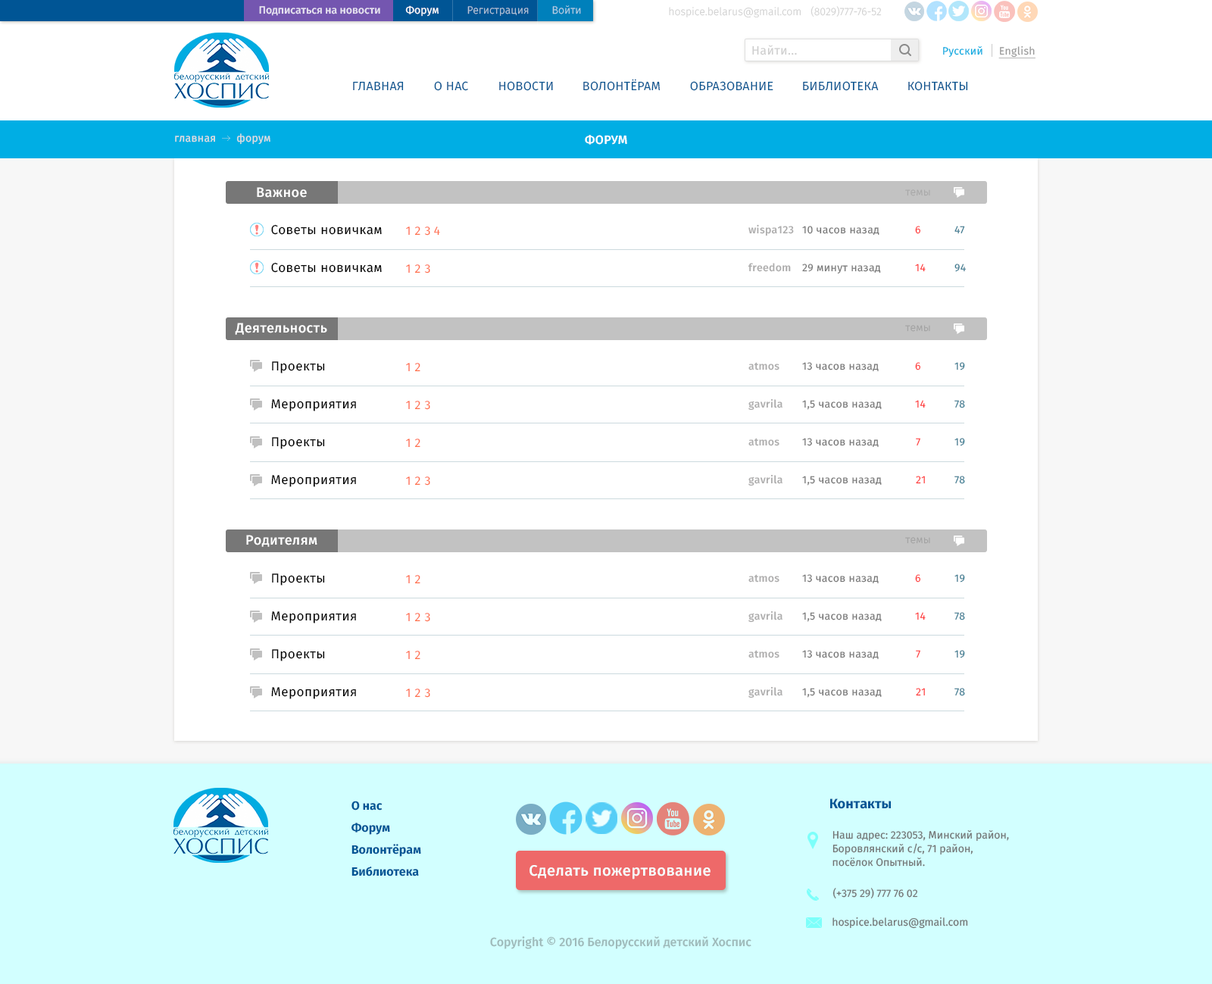
<style>
.page{position:relative;width:1212px;height:984px;background:#ffffff}
.page>*{position:absolute;margin:0}
.t1{font:10.6px "FiraSans-Regular";color:#ffffff}
.t2{font:10.6px "FiraSans-Light";color:#b8d2e5}
.t3{font:10.6px "FiraSans-Medium";color:#e8e4f1}
.t4{font:10.6px "FiraSans-Light";color:#b8c6d9}
.t5{font:10.6px "FiraSans-Light";color:#d1d1d1}
.t6{font:10.6px "FiraSans-Light"}
.t7{font:12.1px "FiraSans-Regular";letter-spacing:0.025em;color:#cdcdcd}
.t8{font:10.6px "FiraSans-Regular";letter-spacing:0.025em;color:#00ace1}
.t9{font:10.6px "FiraSans-Regular";letter-spacing:0.025em;color:#999999;text-decoration:underline}
.t10{font:12.1px "FiraSans-Regular";letter-spacing:0.025em;color:#095691;text-transform:uppercase}
.t11{font:10.6px "FiraSans-Regular";letter-spacing:0.025em;color:#e0dfdf}
.t12{font:12.1px "FiraSans-Medium";letter-spacing:0.025em;color:#ffffff;text-transform:uppercase}
.t13{font:13.6px "FiraSans-Medium";letter-spacing:0.025em;color:#ffffff}
.t14{font:10.6px "FiraSans-Light";letter-spacing:0.025em;color:#a7a7a7}
.t15{font:12.9px "FiraSans-Regular";letter-spacing:0.025em;color:#000000}
.t16{font:12.1px "FiraSans-Regular";letter-spacing:0.025em;color:#ff724c}
.t17{font:10.6px "FiraSans-Medium";letter-spacing:0.025em;color:#999898}
.t18{font:10.6px "FiraSans-Regular";letter-spacing:0.025em;color:#767676}
.t19{font:10.6px "FiraSans-Regular";letter-spacing:0.025em;color:#ff3333}
.t20{font:10.6px "FiraSans-Regular";letter-spacing:0.025em;color:#337c92}
.t21{font:10.6px "FiraSans-Light";letter-spacing:0.025em;color:#a0a0a0}
.t22{font:12.1px "FiraSans-Bold";color:#005595}
.t23{font:13.6px "FiraSans-Bold";color:#005595}
.t24{font:10.6px/13.6px "FiraSans-Regular";color:#727272}
.t25{font:15.1px "FiraSans-Medium";letter-spacing:0.025em;color:#ffffff}
.t26{font:10.6px "FiraSans-Regular";color:#727272}
.t27{font:12.1px "FiraSans-Medium";color:#9fbaba}
</style>
<div class="page">
<p class="t1" style="left:405px;top:5px;width:34px;height:12px">Форум</p>
<p class="t2" style="left:552px;top:5px;width:29px;height:9px">Войти</p>
<p class="t3" style="left:259px;top:6px;width:121px;height:10px">Подписаться на новости</p>
<p class="t4" style="left:467px;top:6px;width:62px;height:10px">Регистрация</p>
<p class="t5" style="left:669px;top:7px;width:132px;height:10px">hospice.belarus@gmail.com</p>
<p class="t6" style="left:810px;top:6px;width:72px;height:11px">(8029)777-76-52</p>
<p class="t7" style="left:752px;top:45px;width:45px;height:10px">Найти...</p>
<p class="t8" style="left:943px;top:46px;width:39px;height:12px">Русский</p>
<p class="t9" style="left:998px;top:45px;width:37px;height:14px">English</p>
<p class="t10" style="left:353px;top:81px;width:51px;height:10px">Главная</p>
<p class="t10" style="left:434px;top:81px;width:34px;height:10px">о нас</p>
<p class="t10" style="left:499px;top:81px;width:54px;height:10px">новости</p>
<p class="t10" style="left:583px;top:79px;width:77px;height:12px">Волонтёрам</p>
<p class="t10" style="left:690px;top:81px;width:83px;height:10px">образование</p>
<p class="t10" style="left:803px;top:81px;width:76px;height:10px">Библиотека</p>
<p class="t10" style="left:908px;top:81px;width:60px;height:10px">КОнтакты</p>
<p class="t11" style="left:175px;top:136px;width:40px;height:6px">главная</p>
<p class="t11" style="left:236px;top:133px;width:34px;height:12px">форум</p>
<p class="t12" style="left:585px;top:135px;width:42px;height:10px">форум</p>
<p class="t13" style="left:257px;top:187px;width:50px;height:11px">Важное</p>
<p class="t14" style="left:905px;top:189px;width:25px;height:7px">темы</p>
<p class="t15" style="left:271px;top:224px;width:111px;height:11px">Советы новичкам</p>
<p class="t16" style="left:406px;top:226px;width:4px;height:9px">1</p>
<p class="t16" style="left:414px;top:226px;width:6px;height:10px">2</p>
<p class="t16" style="left:424px;top:226px;width:6px;height:10px">3</p>
<p class="t16" style="left:434px;top:226px;width:6px;height:10px">4</p>
<p class="t17" style="left:748px;top:224px;width:46px;height:12px">wispa123</p>
<p class="t18" style="left:802px;top:226px;width:77px;height:10px">10 часов назад</p>
<p class="t19" style="left:915px;top:226px;width:6px;height:8px">6</p>
<p class="t20" style="left:954px;top:226px;width:11px;height:8px">47</p>
<p class="t15" style="left:271px;top:262px;width:111px;height:11px">Советы новичкам</p>
<p class="t16" style="left:406px;top:264px;width:4px;height:9px">1</p>
<p class="t16" style="left:414px;top:264px;width:6px;height:9px">2</p>
<p class="t16" style="left:424px;top:264px;width:6px;height:9px">3</p>
<p class="t17" style="left:748px;top:263px;width:43px;height:9px">freedom</p>
<p class="t18" style="left:802px;top:264px;width:79px;height:10px">29 минут назад</p>
<p class="t19" style="left:915px;top:264px;width:11px;height:8px">14</p>
<p class="t20" style="left:954px;top:264px;width:12px;height:8px">94</p>
<p class="t13" style="left:235px;top:323px;width:92px;height:12px">Деятельность</p>
<p class="t21" style="left:905px;top:325px;width:25px;height:7px">темы</p>
<p class="t15" style="left:272px;top:361px;width:53px;height:12px">Проекты</p>
<p class="t16" style="left:406px;top:363px;width:4px;height:8px">1</p>
<p class="t16" style="left:414px;top:363px;width:6px;height:9px">2</p>
<p class="t17" style="left:748px;top:362px;width:31px;height:8px">atmos</p>
<p class="t18" style="left:802px;top:362px;width:77px;height:10px">13 часов назад</p>
<p class="t19" style="left:915px;top:362px;width:6px;height:8px">6</p>
<p class="t20" style="left:954px;top:362px;width:11px;height:8px">19</p>
<p class="t15" style="left:271px;top:399px;width:85px;height:12px">Мероприятия</p>
<p class="t16" style="left:406px;top:401px;width:4px;height:8px">1</p>
<p class="t16" style="left:414px;top:401px;width:6px;height:9px">2</p>
<p class="t16" style="left:424px;top:401px;width:6px;height:9px">3</p>
<p class="t17" style="left:748px;top:398px;width:34px;height:13px">gavrila</p>
<p class="t18" style="left:802px;top:400px;width:80px;height:10px">1,5 часов назад</p>
<p class="t19" style="left:915px;top:400px;width:11px;height:8px">14</p>
<p class="t20" style="left:954px;top:400px;width:11px;height:8px">78</p>
<p class="t15" style="left:272px;top:437px;width:53px;height:12px">Проекты</p>
<p class="t17" style="left:748px;top:438px;width:31px;height:8px">atmos</p>
<p class="t18" style="left:802px;top:438px;width:77px;height:10px">13 часов назад</p>
<p class="t19" style="left:916px;top:438px;width:4px;height:8px">7</p>
<p class="t20" style="left:954px;top:438px;width:11px;height:8px">19</p>
<p class="t16" style="left:406px;top:439px;width:4px;height:8px">1</p>
<p class="t16" style="left:414px;top:439px;width:6px;height:9px">2</p>
<p class="t15" style="left:271px;top:475px;width:85px;height:12px">Мероприятия</p>
<p class="t16" style="left:406px;top:476px;width:4px;height:9px">1</p>
<p class="t16" style="left:414px;top:476px;width:6px;height:10px">2</p>
<p class="t16" style="left:424px;top:476px;width:6px;height:10px">3</p>
<p class="t17" style="left:748px;top:474px;width:34px;height:12px">gavrila</p>
<p class="t18" style="left:802px;top:476px;width:80px;height:10px">1,5 часов назад</p>
<p class="t19" style="left:916px;top:476px;width:9px;height:8px">21</p>
<p class="t20" style="left:954px;top:476px;width:11px;height:8px">78</p>
<p class="t13" style="left:246px;top:535px;width:71px;height:12px">Родителям</p>
<p class="t21" style="left:905px;top:537px;width:25px;height:7px">темы</p>
<p class="t15" style="left:272px;top:573px;width:53px;height:13px">Проекты</p>
<p class="t16" style="left:406px;top:575px;width:4px;height:8px">1</p>
<p class="t16" style="left:414px;top:575px;width:6px;height:9px">2</p>
<p class="t17" style="left:748px;top:574px;width:31px;height:8px">atmos</p>
<p class="t18" style="left:802px;top:574px;width:77px;height:10px">13 часов назад</p>
<p class="t19" style="left:915px;top:574px;width:6px;height:8px">6</p>
<p class="t20" style="left:954px;top:574px;width:11px;height:8px">19</p>
<p class="t15" style="left:271px;top:611px;width:85px;height:12px">Мероприятия</p>
<p class="t16" style="left:406px;top:613px;width:4px;height:8px">1</p>
<p class="t16" style="left:414px;top:613px;width:6px;height:9px">2</p>
<p class="t16" style="left:424px;top:613px;width:6px;height:9px">3</p>
<p class="t17" style="left:748px;top:611px;width:34px;height:12px">gavrila</p>
<p class="t18" style="left:802px;top:612px;width:80px;height:10px">1,5 часов назад</p>
<p class="t19" style="left:915px;top:612px;width:11px;height:8px">14</p>
<p class="t20" style="left:954px;top:612px;width:11px;height:8px">78</p>
<p class="t15" style="left:272px;top:649px;width:53px;height:12px">Проекты</p>
<p class="t16" style="left:406px;top:651px;width:4px;height:8px">1</p>
<p class="t16" style="left:414px;top:651px;width:6px;height:9px">2</p>
<p class="t17" style="left:748px;top:650px;width:31px;height:8px">atmos</p>
<p class="t18" style="left:802px;top:650px;width:77px;height:10px">13 часов назад</p>
<p class="t19" style="left:916px;top:650px;width:4px;height:8px">7</p>
<p class="t20" style="left:954px;top:650px;width:11px;height:8px">19</p>
<p class="t15" style="left:271px;top:687px;width:85px;height:12px">Мероприятия</p>
<p class="t16" style="left:406px;top:689px;width:4px;height:8px">1</p>
<p class="t16" style="left:414px;top:689px;width:6px;height:9px">2</p>
<p class="t16" style="left:424px;top:689px;width:6px;height:9px">3</p>
<p class="t17" style="left:748px;top:686px;width:34px;height:12px">gavrila</p>
<p class="t18" style="left:802px;top:688px;width:80px;height:10px">1,5 часов назад</p>
<p class="t19" style="left:916px;top:688px;width:9px;height:8px">21</p>
<p class="t20" style="left:954px;top:688px;width:11px;height:8px">78</p>
<p class="t22" style="left:351px;top:801px;width:32px;height:9px">О нас</p>
<p class="t23" style="left:830px;top:798px;width:61px;height:11px">Контакты</p>
<p class="t22" style="left:351px;top:823px;width:39px;height:12px">Форум</p>
<p class="t24" style="left:832px;top:830px;width:177px;height:37px">Наш адрес: 223053, Минский район,<br>Боровлянский с/c, 71 район, <br>посёлок Опытный.</p>
<p class="t22" style="left:351px;top:844px;width:70px;height:13px">Волонтёрам</p>
<p class="t22" style="left:351px;top:867px;width:68px;height:9px">Библиотека</p>
<p class="t25" style="left:529px;top:865px;width:181px;height:14px">Сделать пожертвование</p>
<p class="t26" style="left:832px;top:888px;width:86px;height:11px">(+375 29) 777 76 02</p>
<p class="t26" style="left:832px;top:917px;width:136px;height:12px">hospice.belarus@gmail.com</p>
<p class="t27" style="left:490px;top:936px;width:261px;height:13px">Copyright © 2016 Белорусский детский Хоспис</p>
</div>
